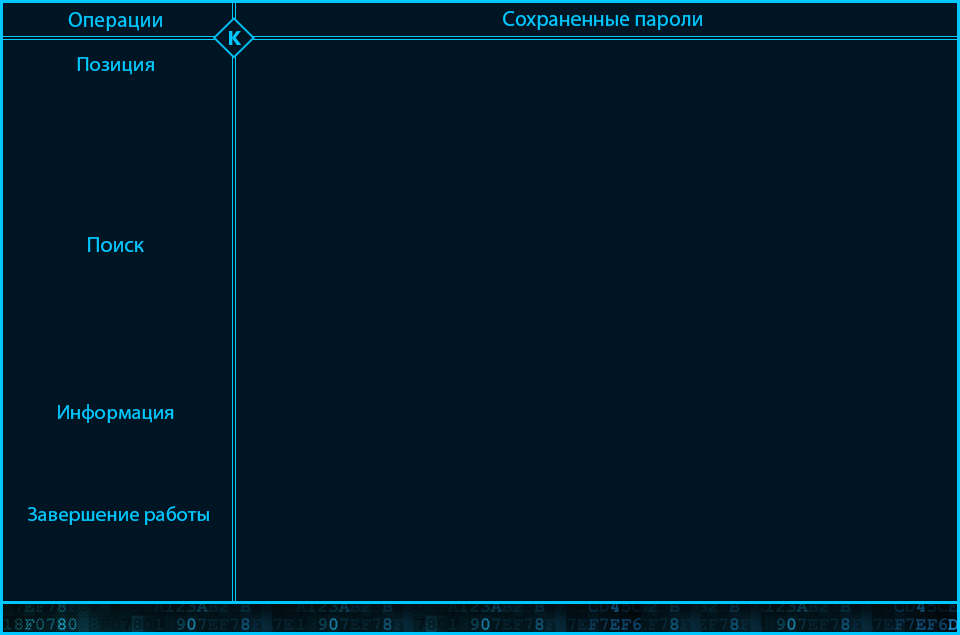
<style>
.page{position:relative;width:960px;height:635px;background:#001523}
.page>*{position:absolute;margin:0}
.t1{font:21.5px "MyriadPro-Regular";color:#00c7ff}
.t2{font:20.3px "NirmalaUI-Bold";color:#00c7ff}
.t3{font:20.8px "MyriadPro-Regular";color:#00c7ff}
</style>
<div class="page">
<p class="t1" style="left:68px;top:12px;width:94px;height:19px">Операции</p>
<p class="t1" style="left:503px;top:11px;width:199px;height:19px">Сохраненные пароли</p>
<p class="t2" style="left:229px;top:31px;width:12px;height:14px">K</p>
<p class="t3" style="left:77px;top:57px;width:77px;height:18px">Позиция</p>
<p class="t1" style="left:88px;top:237px;width:56px;height:15px">Поиск</p>
<p class="t3" style="left:58px;top:404px;width:116px;height:19px">Информация</p>
<p class="t3" style="left:28px;top:506px;width:181px;height:19px">Завершение работы</p>
</div>
